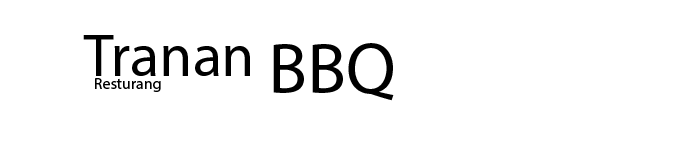
<style>
.page{position:relative;width:675px;height:150px;background:#ffffff}
.page>*{position:absolute;margin:0}
.t1{font:60px "MyriadPro-Regular";color:#000000}
.t2{font:72px "MyriadPro-Regular";color:#000000}
.t3{font:16px "MyriadPro-Regular";color:#000000}
</style>
<div class="page">
<p class="t1" style="left:83px;top:35px;width:167px;height:41px">Tranan</p>
<p class="t2" style="left:273px;top:43px;width:121px;height:58px">BBQ</p>
<p class="t3" style="left:95px;top:78px;width:66px;height:14px">Resturang</p>
</div>
